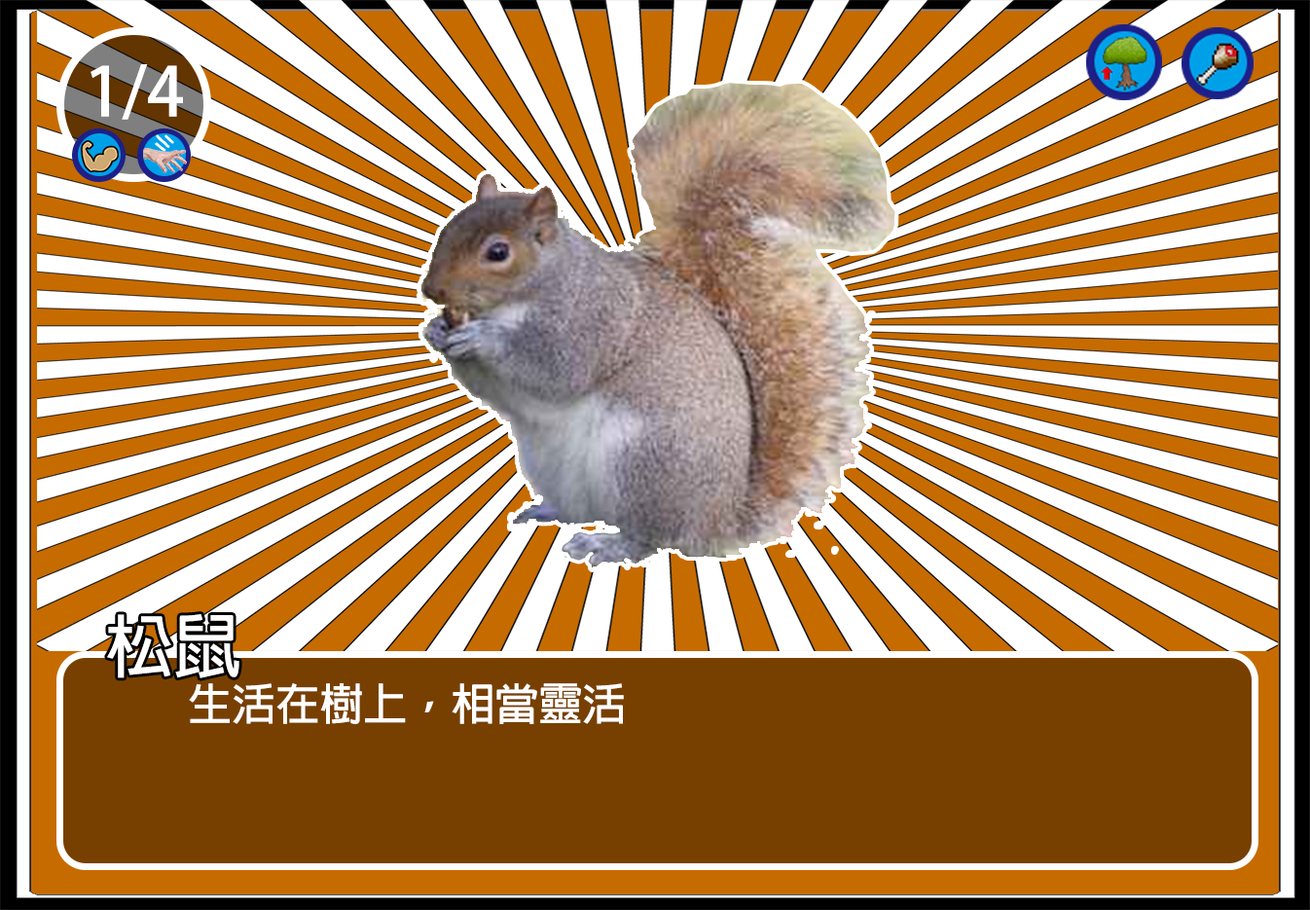
<style>
.page{position:relative;width:1310px;height:910px;background:#ffffff}
.page>*{position:absolute;margin:0}
.t1{font:66.9px "AdobeFanHeitiStd-Bold";color:#ffffff}
.t2{font:68.1px "AdobeFanHeitiStd-Bold";color:#ffffff}
.t3{font:43.8px "AdobeFanHeitiStd-Bold";color:#ffffff}
</style>
<div class="page">
<p class="t1" style="left:91px;top:64px;width:92px;height:56px">1/4</p>
<p class="t2" style="left:107px;top:614px;width:132px;height:64px">松鼠</p>
<p class="t3" style="left:189px;top:683px;width:435px;height:41px">生活在樹上，相當靈活</p>
</div>
